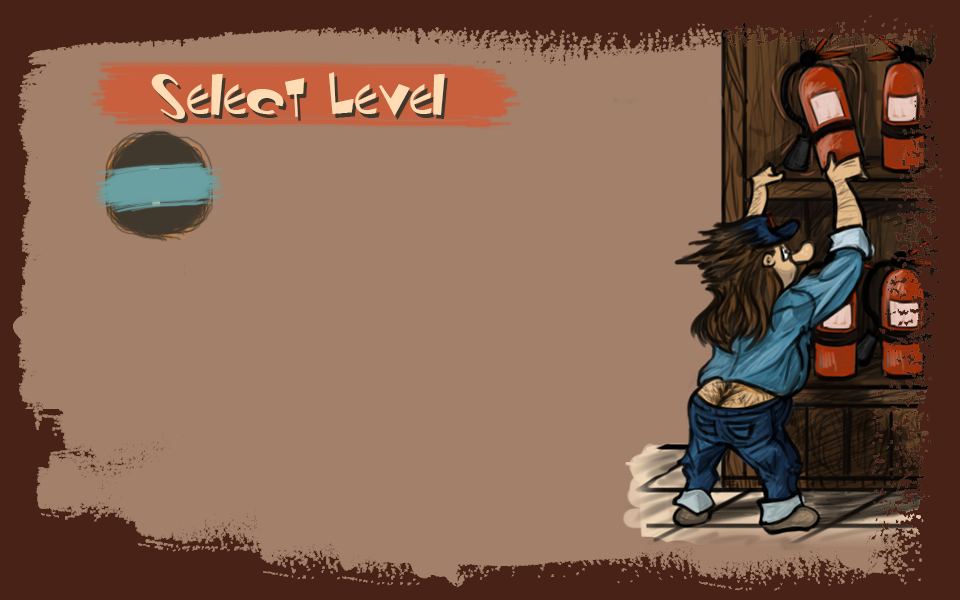
<style>
.page{position:relative;width:960px;height:600px;background:#a2806a}
.page>*{position:absolute;margin:0}
.t1{font:60px "RenStimpy";color:#ffdcb4}
.t2{font:60px "RenStimpy";color:#6aa0a2}
</style>
<div class="page">
<p class="t1" style="left:151px;top:72px;width:294px;height:47px">Select Level</p>
<p class="t2" style="left:148px;top:166px;width:12px;height:40px">1</p>
</div>
